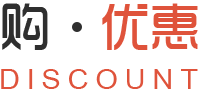
<style>
.page{position:relative;width:200px;height:92px;background:#ffffff}
.page>*{position:absolute;margin:0}
.t1{font:54.8px "TRENDS";color:#df533b;scale:0.91 1}
.t2{font:54.8px "TRENDS";color:#2f2f2f;scale:0.91 1}
.t3{font:28.5px "ArialMT";letter-spacing:0.228em;color:#df533b}
</style>
<div class="page">
<p class="t1" style="left:2px;top:3px;width:196px;height:47px"><span class="t2">购  </span>优惠</p>
<p class="t3" style="left:1px;top:69px;width:197px;height:20px">DISCOUNT</p>
</div>
